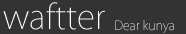
<style>
.page{position:relative;width:186px;height:34px;background:#333333}
.page>*{position:absolute;margin:0}
.t1{font:33.2px "KozGoStd-ExtraLight";color:#ffffff}
.t2{font:12.5px "KozGoStd-ExtraLight"}
</style>
<div class="page">
<p class="t1" style="left:3px;top:2px;width:102px;height:28px">waftter</p>
<p class="t2" style="left:115px;top:20px;width:59px;height:13px">Dear kunya</p>
</div>
